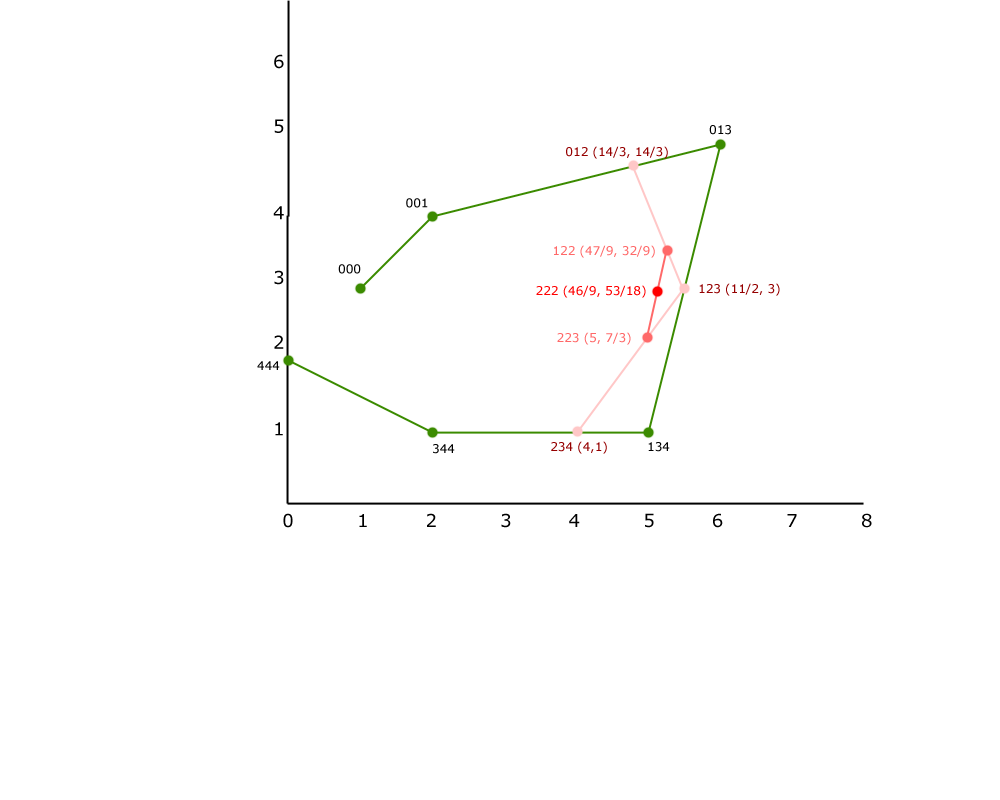
<style>
.page{position:relative;width:1000px;height:800px;background:#ffffff}
.page>*{position:absolute;margin:0}
.t1{font:18px "Verdana";color:#000000}
.t2{font:12px "Verdana";color:#000000}
.t3{font:12px "Verdana";color:#950000}
.t4{font:12px "Verdana";color:#ff6969}
.t5{font:12px "Verdana";color:#ff0000}
</style>
<div class="page">
<p class="t1" style="left:273px;top:54px;width:11px;height:382px">6<br><br><br>5<br><br><br><br>4<br><br><br>3<br><br><br>2<br><br><br><br>1</p>
<p class="t2" style="left:709px;top:125px;width:22px;height:10px">013</p>
<p class="t3" style="left:566px;top:146px;width:102px;height:13px">012 (14/3, 14/3)</p>
<p class="t2" style="left:406px;top:198px;width:22px;height:10px">001</p>
<p class="t4" style="left:554px;top:245px;width:101px;height:13px">122 (47/9, 32/9)</p>
<p class="t2" style="left:338px;top:264px;width:23px;height:10px">000</p>
<p class="t5" style="left:536px;top:285px;width:110px;height:13px">222 (46/9, 53/18)</p>
<p class="t3" style="left:699px;top:283px;width:81px;height:13px">123 (11/2, 3)</p>
<p class="t4" style="left:557px;top:332px;width:74px;height:13px">223 (5, 7/3)</p>
<p class="t2" style="left:257px;top:361px;width:23px;height:9px">444</p>
<p class="t2" style="left:433px;top:444px;width:22px;height:10px">344</p>
<p class="t3" style="left:551px;top:441px;width:56px;height:13px">234 (4,1)</p>
<p class="t2" style="left:648px;top:442px;width:22px;height:10px">134</p>
<p class="t1" style="left:283px;top:513px;width:589px;height:15px">0          1         2          3         4          5         6          7          8</p>
</div>
